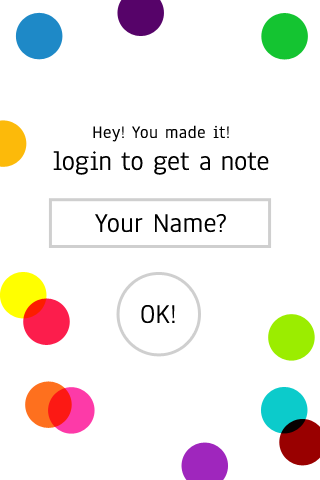
<style>
.page{position:relative;width:320px;height:480px;background:#ffffff}
.page>*{position:absolute;margin:0}
.t1{font:18px/30px "Anaheim-Regular";letter-spacing:0.035em;color:#000000}
.t2{font:28px/12px "Anaheim-Regular";letter-spacing:-0.005em;color:#000000}
.t3{font:28px/32px "Anaheim-Regular";letter-spacing:-0.005em;color:#000000}
.t4{font:28px "Anaheim-Regular";letter-spacing:0.015em;color:#000000}
</style>
<div class="page">
<p class="t1" style="left:53px;top:125px;width:216px;height:50px;text-align:center">Hey! You made it!<br><span class="t2">login to </span><span class="t3">get a note</span></p>
<p class="t4" style="left:95px;top:214px;width:131px;height:19px">Your Name?</p>
<p class="t4" style="left:141px;top:305px;width:34px;height:19px">OK!</p>
</div>
